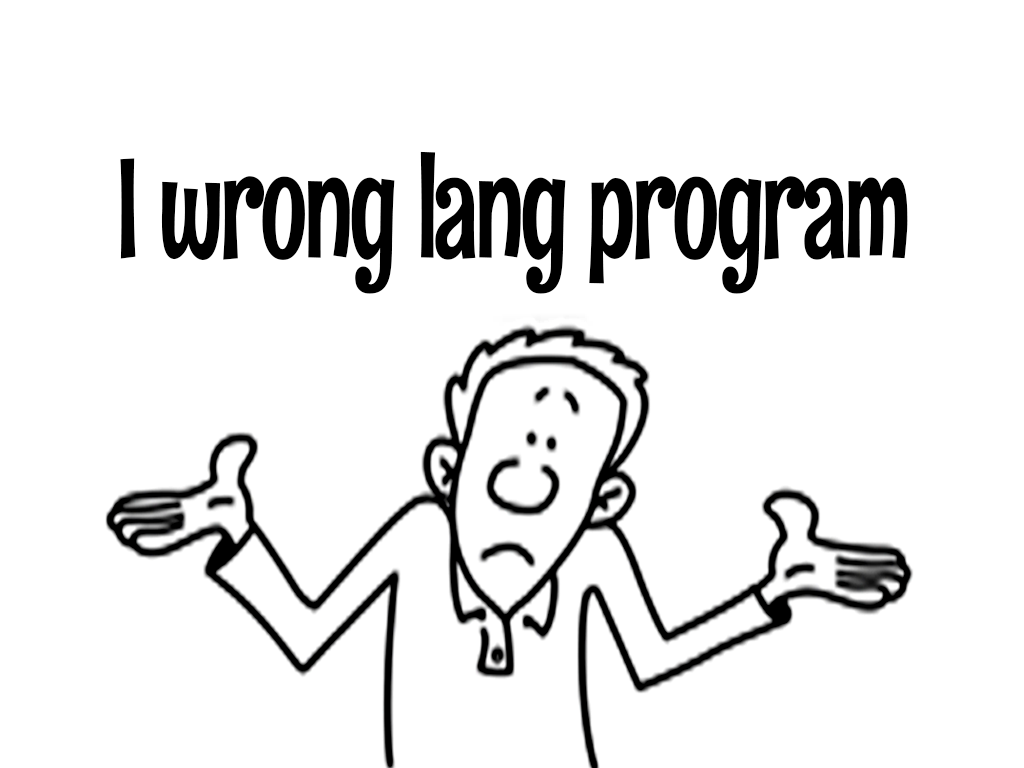
<style>
.page{position:relative;width:1024px;height:768px;background:#ffffff}
.page>*{position:absolute;margin:0}
.t1{font:138px "RumRaisin-Regular";letter-spacing:-0.02em;color:#000000;scale:0.81 1}
</style>
<div class="page">
<p class="t1" style="left:120px;top:151px;width:788px;height:143px">I wrong lang program</p>
</div>
